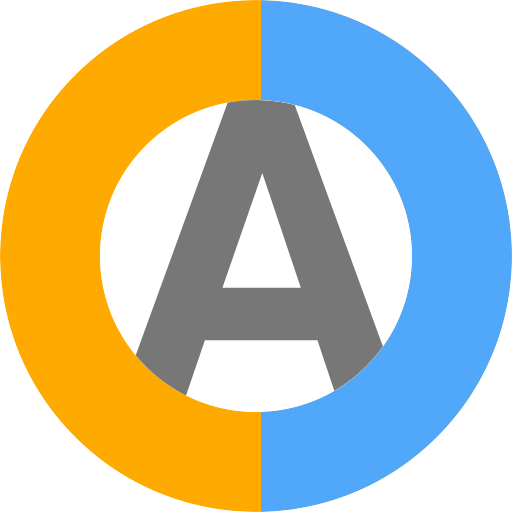
<style>
.page{position:relative;width:512px;height:512px;background:#ffffff}
.page>*{position:absolute;margin:0}
.t1{font:445.8px "DINPro-Bold";letter-spacing:0.01em;color:#777777}
</style>
<div class="page">
<p class="t1" style="left:120px;top:78px;width:281px;height:319px">A</p>
</div>
